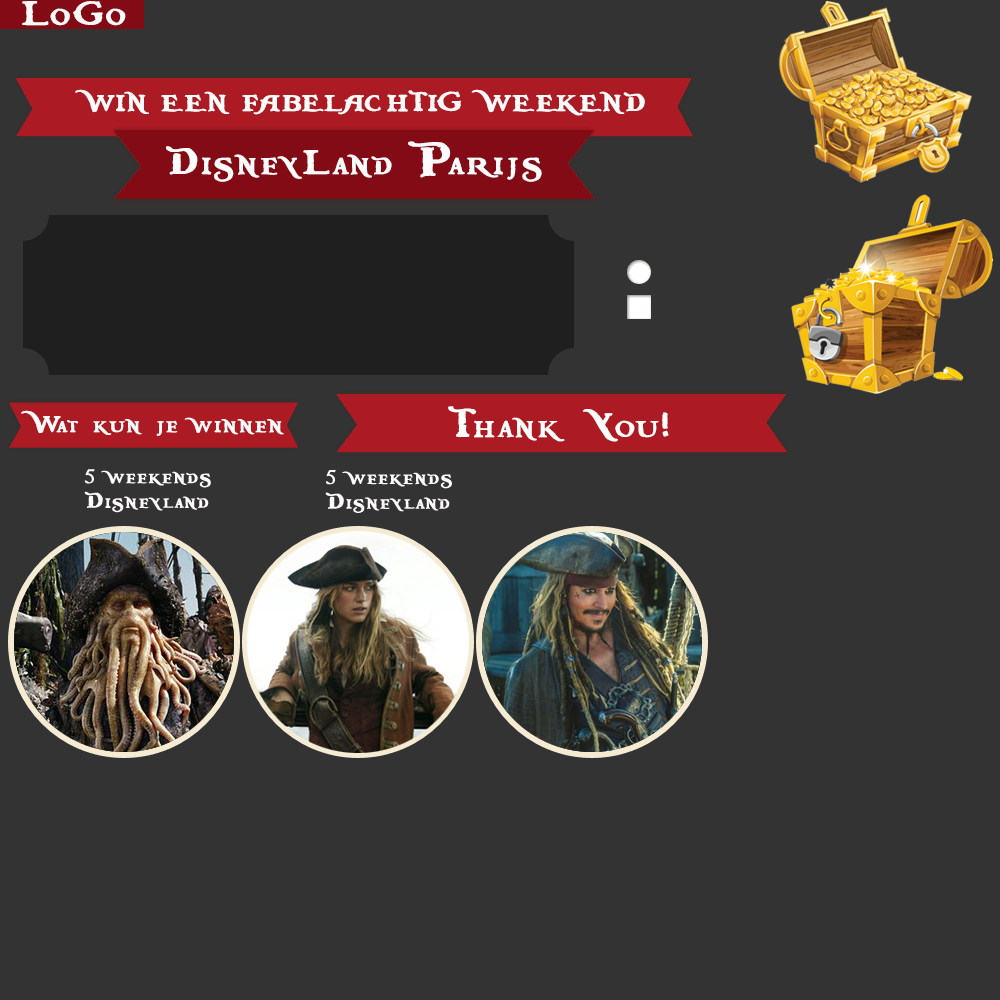
<style>
.page{position:relative;width:1000px;height:1000px;background:#333333}
.page>*{position:absolute;margin:0}
.t1{font:36px "BlackPearl";color:#fcfafa}
.t2{font:24px "BlackPearl";color:#fcfafa}
.t3{font:20.6px "BlackPearl";color:#fcfafa}
</style>
<div class="page">
<p class="t1" style="left:22px;top:1px;width:104px;height:25px">Logo</p>
<p class="t2" style="left:75px;top:89px;width:570px;height:27px">WIN EEN FABELAc<span class="t1">h</span>TIG WEEKEND</p>
<p class="t1" style="left:166px;top:141px;width:376px;height:41px">DisneyLand Parijs</p>
<p class="t2" style="left:21px;top:410px;width:263px;height:26px">Wat kun je winnen</p>
<p class="t3" style="left:84px;top:469px;width:127px;height:44px">5 weekends<br>Disneyland</p>
<p class="t3" style="left:325px;top:470px;width:127px;height:43px">5 weekends<br>Disneyland</p>
</div>
